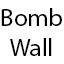
<style>
.page{position:relative;width:64px;height:64px;background:#ffffff}
.page>*{position:absolute;margin:0}
.t1{font:25px "MyriadPro-Regular";color:#000000}
</style>
<div class="page">
<p class="t1" style="left:1px;top:8px;width:61px;height:48px;text-align:center">Bomb<br>Wall</p>
</div>
